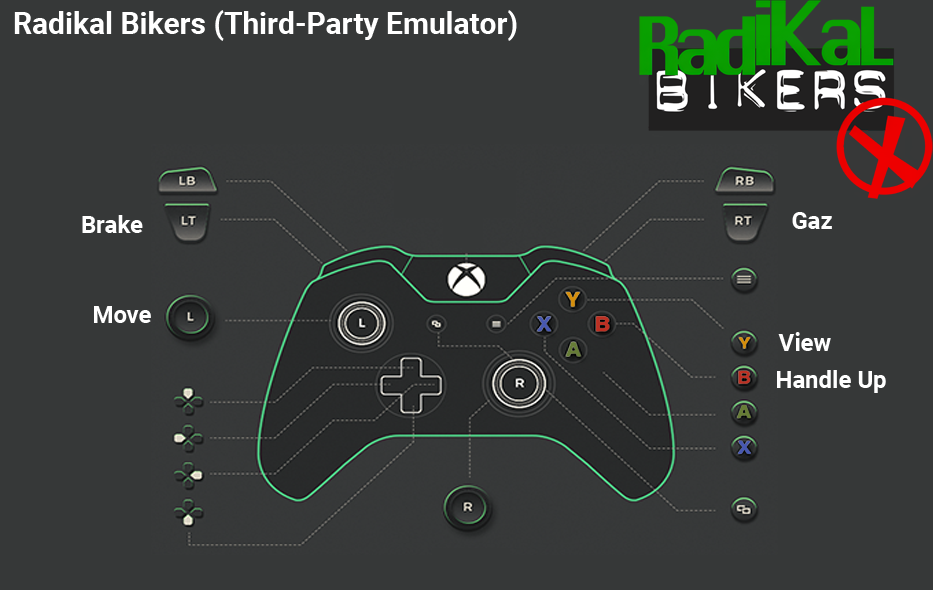
<style>
.page{position:relative;width:933px;height:590px;background:#363838}
.page>*{position:absolute;margin:0}
.t1{font:30px "Roboto-Bold";color:#ffffff}
.t2{font:24px "Roboto-Bold";color:#ffffff}
</style>
<div class="page">
<p class="t1" style="left:14px;top:10px;width:503px;height:31px">Radikal Bikers (Third-Party Emulator)</p>
<p class="t2" style="left:82px;top:215px;width:61px;height:18px">Brake</p>
<p class="t2" style="left:792px;top:212px;width:40px;height:17px">Gaz</p>
<p class="t2" style="left:94px;top:306px;width:57px;height:17px">Move</p>
<p class="t2" style="left:778px;top:332px;width:53px;height:19px">View</p>
<p class="t2" style="left:777px;top:370px;width:109px;height:23px">Handle Up</p>
</div>
